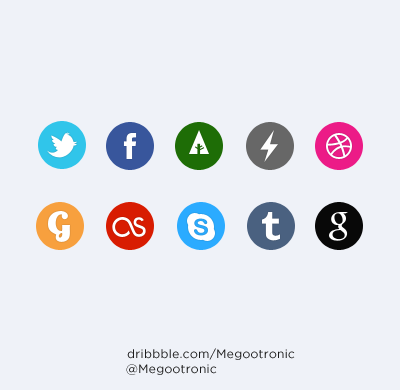
<style>
.page{position:relative;width:400px;height:390px;background:#eff2f8}
.page>*{position:absolute;margin:0}
.t1{font:12px "Gotham-Book";letter-spacing:0.025em;color:#1c1c1c}
.t2{font:12px "Gotham-Book";letter-spacing:0.025em;color:#1d1d1d}
</style>
<div class="page">
<p class="t1" style="left:127px;top:348px;width:168px;height:12px">dribbble.com/Megootronic</p>
<p class="t2" style="left:126px;top:364px;width:91px;height:11px">@Megootronic</p>
</div>
